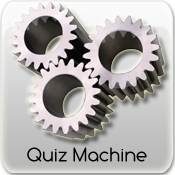
<style>
.page{position:relative;width:175px;height:175px}
.page>*{position:absolute;margin:0}
.t1{font:20px "Comfortaa";color:#000000}
</style>
<div class="page">
<p class="t1" style="left:27px;top:147px;width:120px;height:15px">Quiz Machine</p>
</div>
